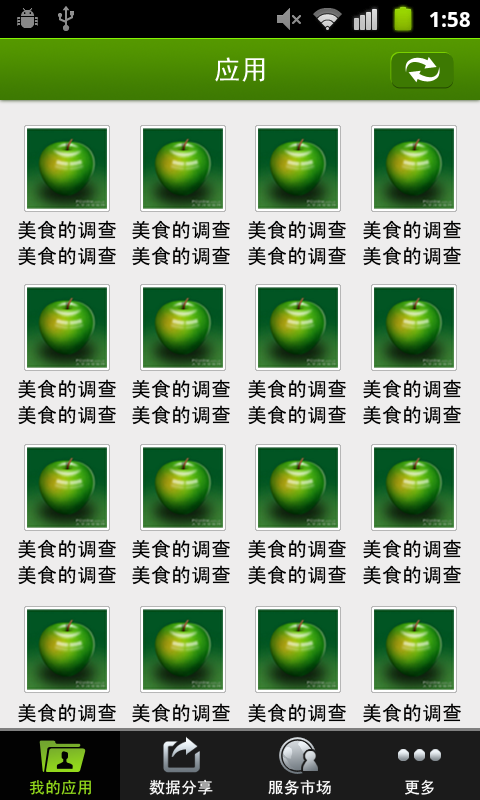
<style>
.page{position:relative;width:480px;height:800px;background:#eeeded}
.page>*{position:absolute;margin:0}
.t1{font:27px "SimHei";color:#ffffff}
.t2{font:20px/26px "SimHei";color:#000000}
.t3{font:20px/26px "SimHei";color:#0d0d0d}
.t4{font:16px "SimHei";color:#94db1c}
.t5{font:16px "SimHei";color:#ffffff}
</style>
<div class="page">
<p class="t1" style="left:215px;top:57px;width:50px;height:25px">应用</p>
<p class="t2" style="left:18px;top:220px;width:98px;height:46px">美食的调查<br>美食的调查</p>
<p class="t2" style="left:132px;top:220px;width:98px;height:46px">美食的调查<br>美食的调查</p>
<p class="t2" style="left:248px;top:220px;width:98px;height:46px">美食的调查<br>美食的调查</p>
<p class="t2" style="left:363px;top:220px;width:98px;height:46px">美食的调查<br>美食的调查</p>
<p class="t2" style="left:18px;top:379px;width:98px;height:46px">美食的调查<br>美食的调查</p>
<p class="t2" style="left:132px;top:379px;width:98px;height:46px">美食的调查<br>美食的调查</p>
<p class="t2" style="left:248px;top:379px;width:98px;height:46px">美食的调查<br>美食的调查</p>
<p class="t2" style="left:363px;top:379px;width:98px;height:46px">美食的调查<br>美食的调查</p>
<p class="t2" style="left:18px;top:539px;width:98px;height:46px">美食的调查<br>美食的调查</p>
<p class="t2" style="left:132px;top:539px;width:98px;height:46px">美食的调查<br>美食的调查</p>
<p class="t2" style="left:248px;top:539px;width:98px;height:46px">美食的调查<br>美食的调查</p>
<p class="t2" style="left:363px;top:539px;width:98px;height:46px">美食的调查<br>美食的调查</p>
<p class="t2" style="left:18px;top:703px;width:98px;height:46px">美食的调查<br>美食的调查</p>
<p class="t3" style="left:132px;top:703px;width:98px;height:46px">美食的调查<br>美食的调查</p>
<p class="t3" style="left:248px;top:703px;width:98px;height:46px">美食的调查<br>美食的调查</p>
<p class="t3" style="left:363px;top:703px;width:98px;height:46px">美食的调查<br>美食的调查</p>
<p class="t4" style="left:29px;top:780px;width:62px;height:15px">我的应用</p>
<p class="t5" style="left:149px;top:779px;width:64px;height:16px">数据分享</p>
<p class="t5" style="left:268px;top:779px;width:63px;height:16px">服务市场</p>
<p class="t5" style="left:405px;top:779px;width:29px;height:16px">更多</p>
</div>
